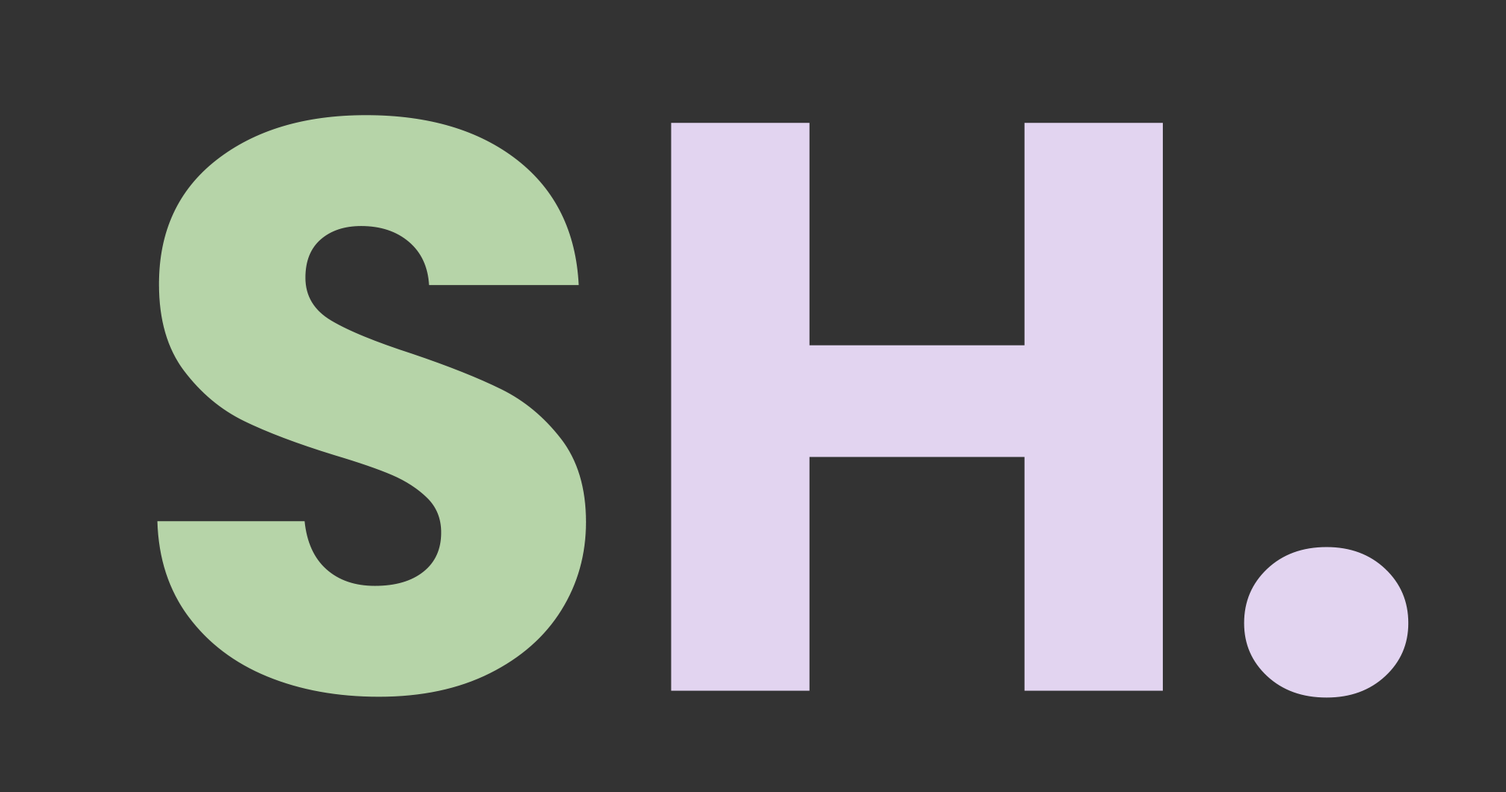
<style>
.page{position:relative;width:1506px;height:792px;background:#333333}
.page>*{position:absolute;margin:0}
.t1{font:808.6px "Poppins-Bold";color:#e2d4f0}
.t2{font:808.6px "Poppins-Bold";color:#b6d4a8}
</style>
<div class="page">
<p class="t1" style="left:157px;top:115px;width:1252px;height:583px"><span class="t2">S</span>H.</p>
</div>
